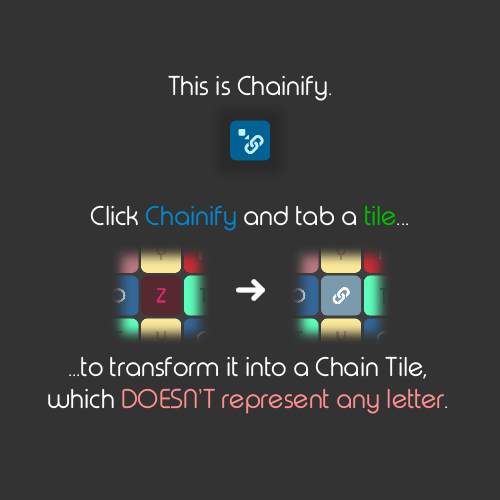
<style>
.page{position:relative;width:500px;height:500px;background:#333333}
.page>*{position:absolute;margin:0}
.t1{font:27px "TypoRoundLightDemo";color:#ffffff}
.t2{font:27px "TypoRoundLightDemo";color:#0088ce}
.t3{font:27px "TypoRoundLightDemo";color:#00bd00}
.t4{font:27px "TypoRoundLightDemo";color:#ff8f8f}
</style>
<div class="page">
<p class="t1" style="left:168px;top:75px;width:163px;height:26px">This is Chainify.</p>
<p class="t1" style="left:90px;top:205px;width:318px;height:26px">Click <span class="t2">Chainify</span> and tab a <span class="t3">tile</span>...</p>
<p class="t1" style="left:48px;top:356px;width:399px;height:58px;text-align:center">...to transform it into a Chain Tile,<br>which <span class="t4">DOESN’T represent any letter</span>.</p>
</div>
